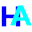
<style>
.page{position:relative;width:32px;height:32px;background:#ffffff}
.page>*{position:absolute;margin:0}
.t1{font:29px "GillSans-SemiBold";color:#0000ff;font-weight:bold}
.t2{font:29px "GillSans-SemiBold";color:#00ffff;font-weight:bold}
</style>
<div class="page">
<p class="t1" style="left:1px;top:6px;width:20px;height:21px">H</p>
<p class="t2" style="left:10px;top:5px;width:22px;height:21px">A</p>
</div>
